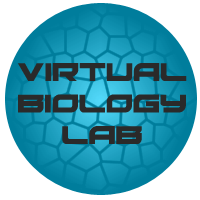
<style>
.page{position:relative;width:200px;height:200px;background:#ffffff}
.page>*{position:absolute;margin:0}
.t1{font:28px "RedRocket";color:#2a2a2a}
</style>
<div class="page">
<p class="t1" style="left:17px;top:63px;width:170px;height:81px;text-align:center">VIRTUAL<br>BIOLOGY<br>LAB</p>
</div>
